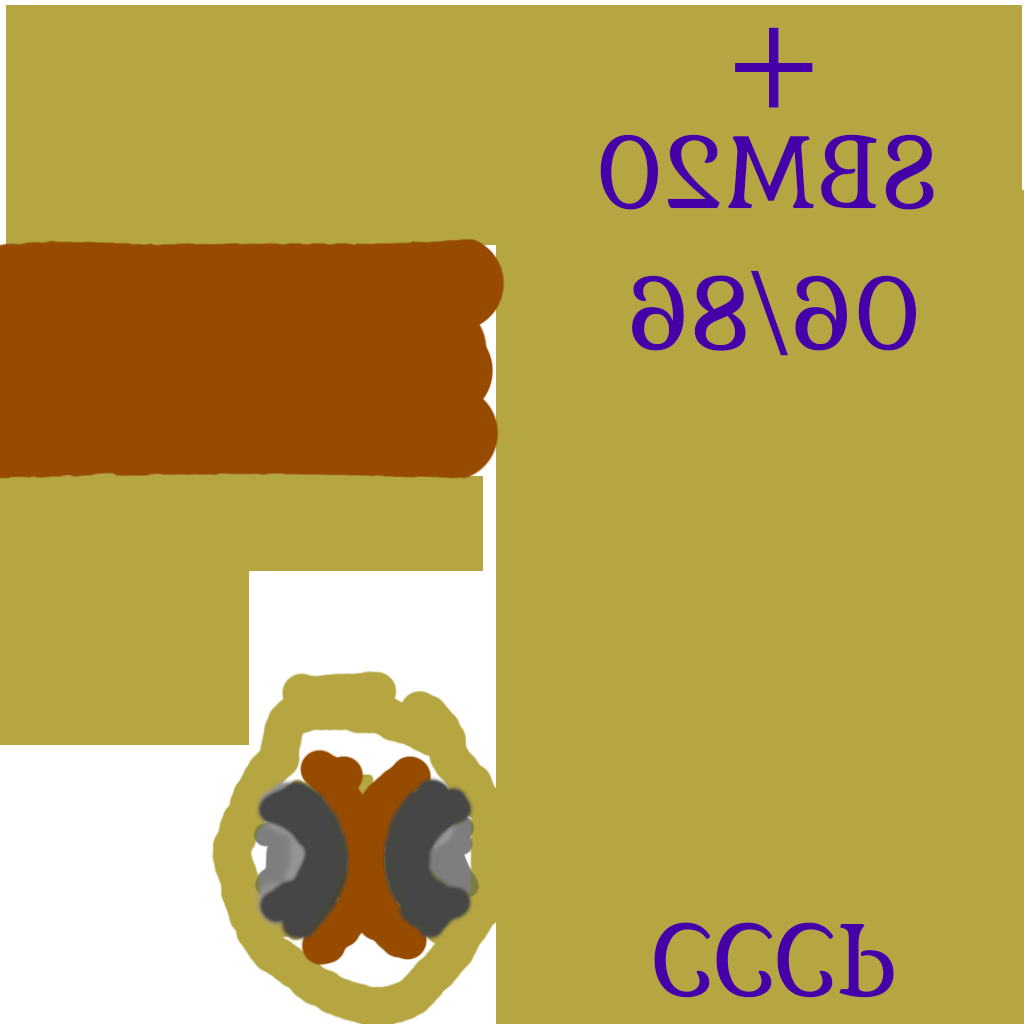
<style>
.page{position:relative;width:1024px;height:1024px;background:#b5a642}
.page>*{position:absolute;margin:0}
.t1{font:150px "MyriadPro-Regular";color:#4600a7}
.t2{font:100px "Gabriela-Regular";color:#4600a7}
</style>
<div class="page">
<p class="t1" style="left:735px;top:27px;width:78px;height:81px">+</p>
<p class="t2" style="left:600px;top:134px;width:334px;height:76px;rotate:180deg">SBM20</p>
<p class="t2" style="left:632px;top:270px;width:284px;height:86px;rotate:180deg">06/86</p>
<p class="t2" style="left:654px;top:922px;width:240px;height:76px">CCCP</p>
</div>
